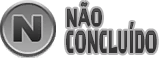
<style>
.page{position:relative;width:160px;height:58px;background:#ffffff}
.page>*{position:absolute;margin:0}
.t1{font:22.9px "KurokaneStd-EB";color:#3b3b3b;scale:0.61 1}
.t2{font:28px "KurokaneStd-EB";color:#363536;scale:0.49 1}
</style>
<div class="page">
<p class="t1" style="left:67px;top:1px;width:35px;height:26px">NÃO</p>
<p class="t2" style="left:66px;top:22px;width:91px;height:32px">CONCLUÍDO</p>
</div>
